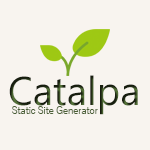
<style>
.page{position:relative;width:150px;height:150px;background:#f8f4ef}
.page>*{position:absolute;margin:0}
.t1{font:40px "SegoeUI"}
.t2{font:10px "YuGothic-Regular";letter-spacing:-0.05em;color:#4b6037}
</style>
<div class="page">
<p class="t1" style="left:9px;top:75px;width:129px;height:40px">Catalpa</p>
<p class="t2" style="left:12px;top:106px;width:86px;height:8px">Static Site Generator</p>
</div>
